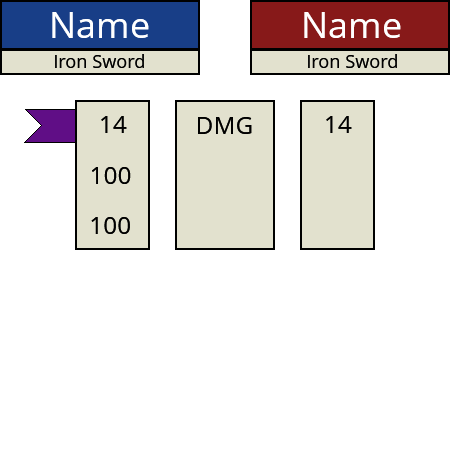
<style>
.page{position:relative;width:450px;height:450px;background:#ffffff}
.page>*{position:absolute;margin:0}
.t1{font:36px "OpenSans";color:#ffffff}
.t2{font:18px "OpenSans";color:#000000}
.t3{font:24px "OpenSans";color:#000000}
</style>
<div class="page">
<p class="t1" style="left:52px;top:12px;width:97px;height:26px">Name</p>
<p class="t1" style="left:304px;top:12px;width:97px;height:26px">Name</p>
<p class="t2" style="left:55px;top:54px;width:89px;height:14px">Iron Sword</p>
<p class="t2" style="left:308px;top:54px;width:89px;height:14px">Iron Sword</p>
<p class="t3" style="left:101px;top:116px;width:26px;height:17px">14</p>
<p class="t3" style="left:198px;top:117px;width:54px;height:17px">DMG</p>
<p class="t3" style="left:326px;top:116px;width:26px;height:17px">14</p>
<p class="t3" style="left:92px;top:167px;width:39px;height:17px">100</p>
<p class="t3" style="left:91px;top:217px;width:39px;height:17px">100</p>
</div>
